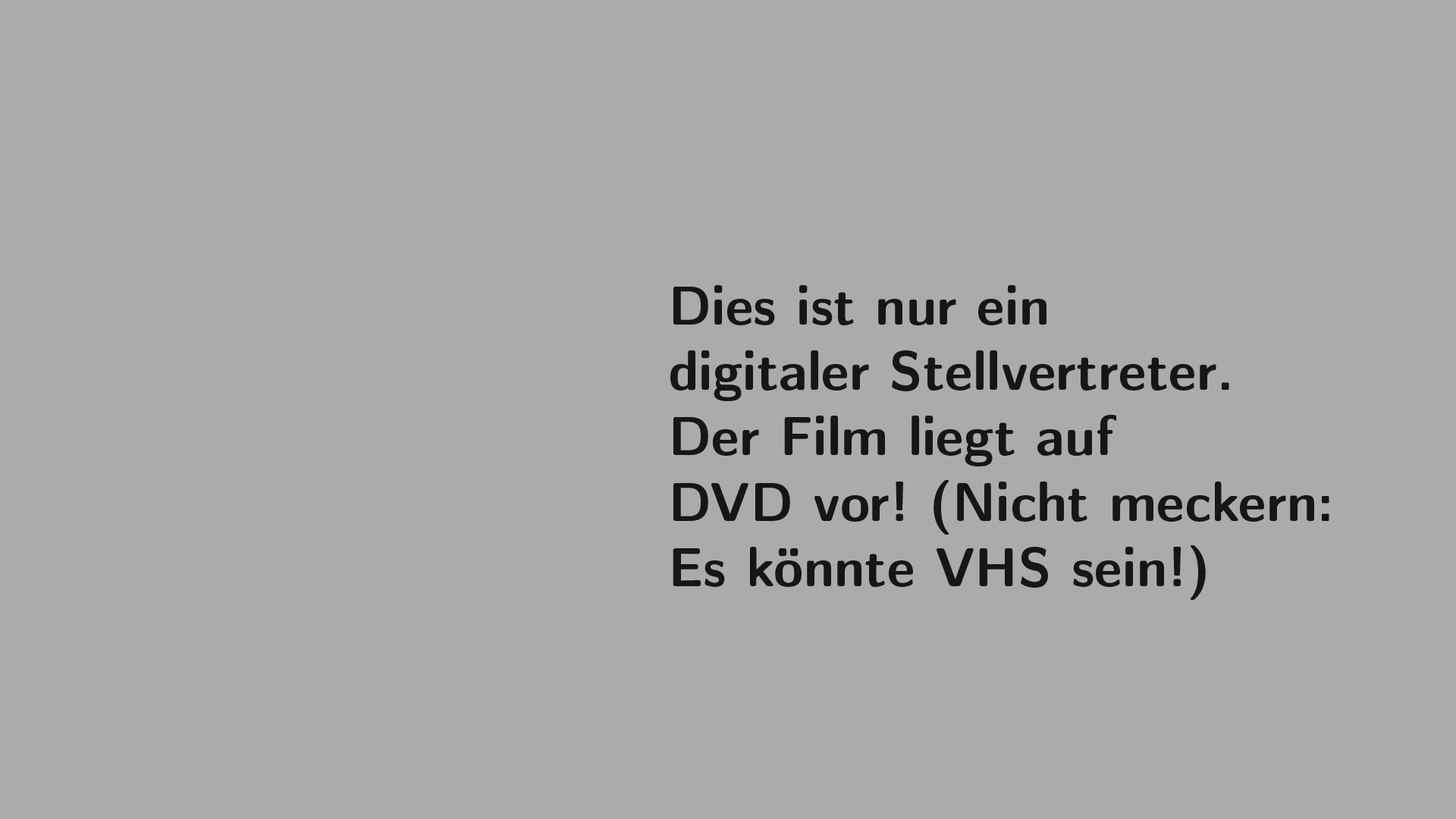
<style>
.page{position:relative;width:1456px;height:819px;background:#ababab}
.page>*{position:absolute;margin:0}
.t1{font:54.6px "CMUSansSerif-Bold";color:#161616}
</style>
<div class="page">
<p class="t1" style="left:670px;top:285px;width:659px;height:315px">Dies ist nur ein <br>digitaler Stellvertreter.<br>Der Film liegt auf <br>DVD vor! (Nicht meckern: <br>Es könnte VHS sein!)</p>
</div>
